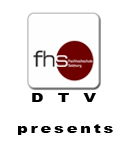
<style>
.page{position:relative;width:128px;height:153px;background:#ffffff}
.page>*{position:absolute;margin:0}
.t1{font:12px "Arial-Black";letter-spacing:0.86em;color:#000000;scale:1.36 1}
.t2{font:12px "Arial-Black";letter-spacing:0.16em;color:#000000;scale:1.36 1}
</style>
<div class="page">
<p class="t1" style="left:32px;top:93px;width:64px;height:9px">DTV</p>
<p class="t2" style="left:18px;top:124px;width:95px;height:11px">presents</p>
</div>
